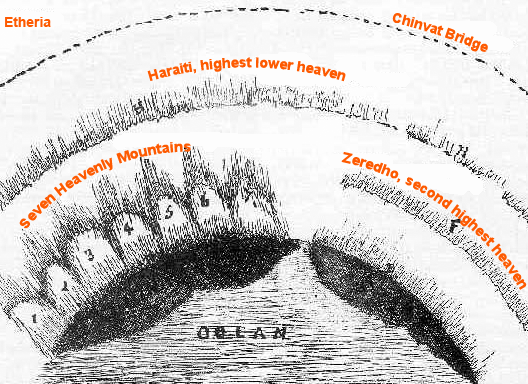
<style>
.page{position:relative;width:528px;height:384px}
.page>*{position:absolute;margin:0}
.t1{font:14px "Arial-BoldMT";letter-spacing:-0.005em;color:#fd5a01}
</style>
<div class="page">
<p class="t1" style="left:5px;top:17px;width:46px;height:10px">Etheria</p>
<p class="t1" style="left:392px;top:13px;width:96px;height:39px;rotate:18deg">Chinvat Bridge</p>
<p class="t1" style="left:147px;top:57px;width:199px;height:25px">Haraiti, highest lower heaven</p>
<p class="t1" style="left:19px;top:142px;width:172px;height:87px;rotate:-25deg">Seven Heavenly Mountains</p>
<p class="t1" style="left:341px;top:152px;width:186px;height:138px;rotate:36deg">Zeredho, second highest heaven</p>
</div>
